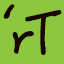
<style>
.page{position:relative;width:64px;height:64px;background:#8dc63f}
.page>*{position:absolute;margin:0}
.t1{font:52.7px "HanziPenTC-W5";letter-spacing:-0.16em;color:#1c0202;scale:1.12 1}
.t2{font:52.7px "HanziPenTC-W5";letter-spacing:-0.16em;color:#1a0505;scale:1.12 1}
.t3{font:55px "HanziPenTC-W5";color:#1a0404;scale:1.06 1}
</style>
<div class="page">
<p class="t1" style="left:3px;top:4px;width:31px;height:50px">‘<span class="t2">r</span></p>
<p class="t3" style="left:25px;top:10px;width:37px;height:45px">T</p>
</div>
